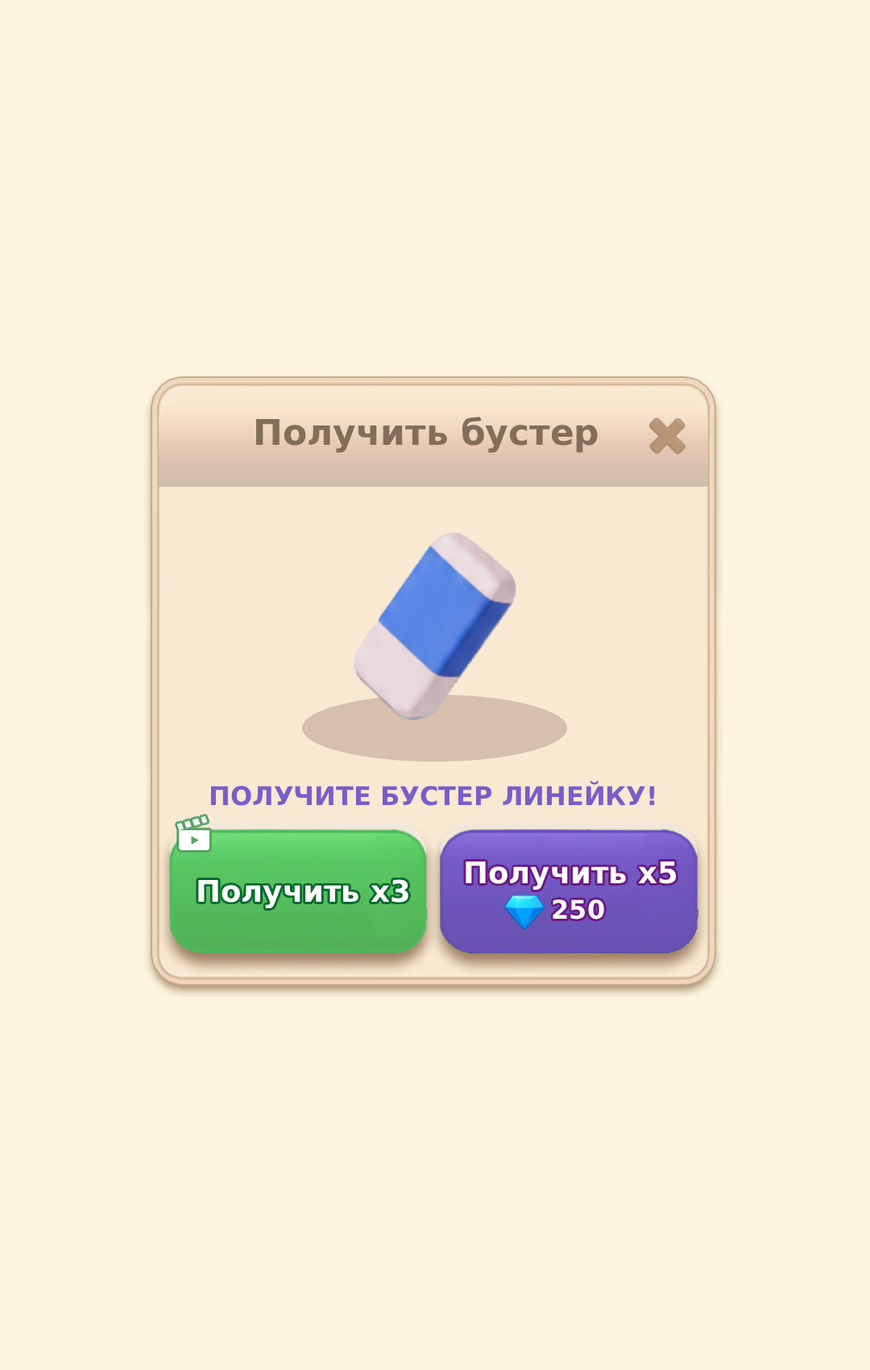
<style>
.page{position:relative;width:870px;height:1370px;background:#fdf5e0}
.page>*{position:absolute;margin:0}
.t1{font:35.5px "DejaVuSans-Bold";color:#826e5a}
.t2{font:25.8px "DejaVuSans-Bold";color:#795dcb}
.t3{font:29.8px "DejaVuSans-Bold";color:#ffffff}
.t4{font:25.8px "DejaVuSans-Bold";color:#ffffff}
</style>
<div class="page">
<p class="t1" style="left:256px;top:417px;width:342px;height:36px">Получить бустер</p>
<p class="t2" style="left:210px;top:781px;width:445px;height:25px">ПОЛУЧИТЕ БУСТЕР ЛИНЕЙКУ!</p>
<p class="t3" style="left:466px;top:862px;width:211px;height:28px">Получить х5</p>
<p class="t3" style="left:198px;top:879px;width:211px;height:29px">Получить х3</p>
<p class="t4" style="left:553px;top:899px;width:51px;height:21px">250</p>
</div>
